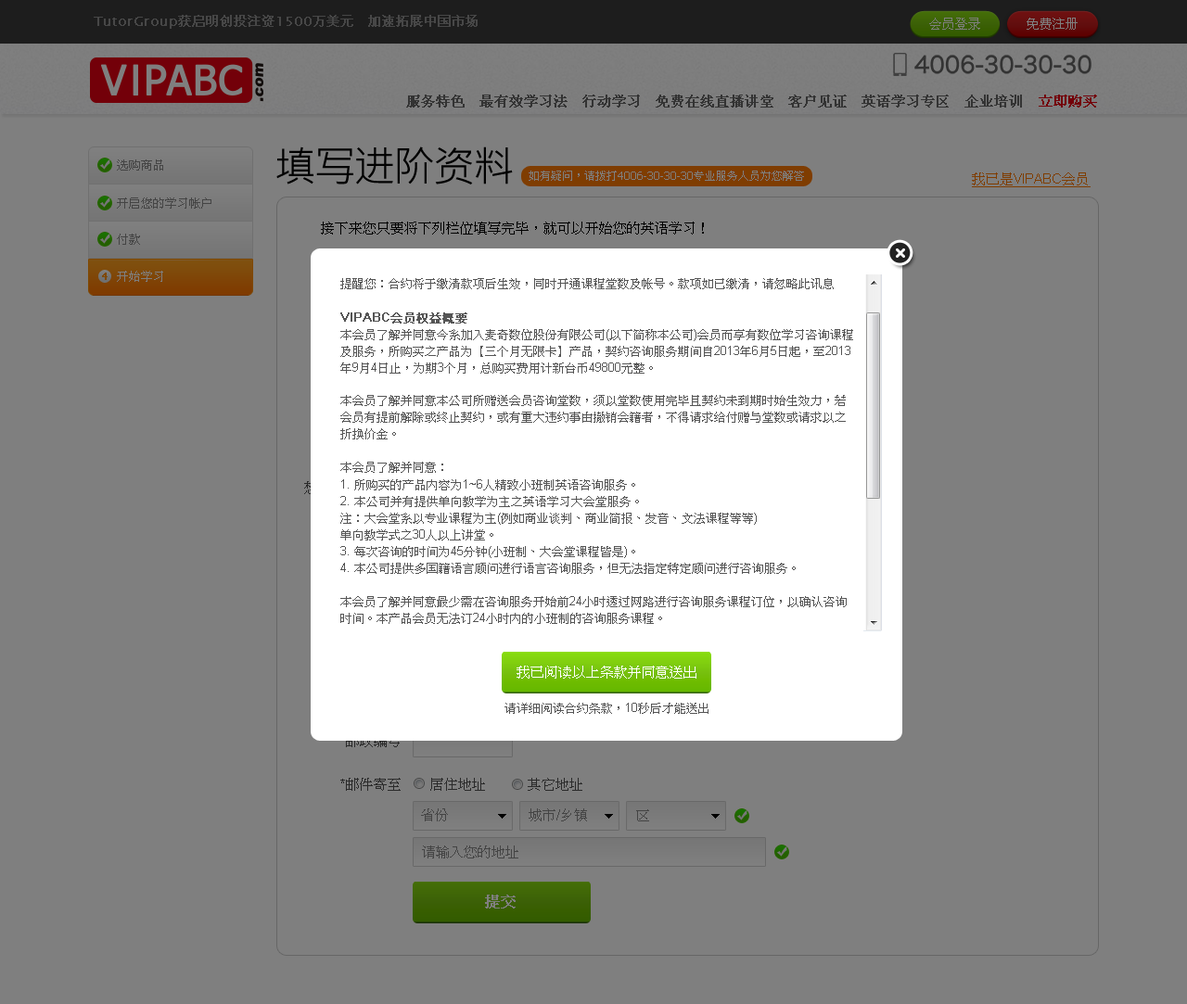
<style>
.page{position:relative;width:1187px;height:1004px;background:#7f7f7f}
.page>*{position:absolute;margin:0}
.t1{font:41.7px "MicrosoftJhengHeiRegular";letter-spacing:-0.05em;color:#000000}
.t2{font:12.1px "PMingLiU";color:#444444}
.t3{font:11.1px "Tahoma";color:#7f7f7f}
.t4{font:11.1px "PMingLiU";color:#7f7f7f}
.t5{font:13.9px "ArialMT";color:#7f3d01;text-decoration:underline}
.t6{font:13.9px "PMingLiU";color:#7f3d01;text-decoration:underline}
.t7{font:13.9px "PMingLiU";color:#000000}
.t8{font:10.2px "Tahoma";color:#7f4800;font-weight:bold}
.t9{font:12.1px "PMingLiU";color:#7f7f7f}
.t10{font:12.1px/16.7px "PMingLiU";color:#555555}
.t11{font:12.1px/16.7px "ArialMT";color:#555555;font-weight:bold}
.t12{font:12.1px/16.7px "PMingLiU";color:#555555;font-weight:bold}
.t13{font:12.1px/16.7px "ArialMT";color:#555555}
.t14{font:13.9px "PMingLiU";color:#ffffff}
.t15{font:12.1px "PMingLiU";color:#555555}
.t16{font:12.1px "ArialMT";color:#555555}
.t17{font:13.9px "PMingLiU";color:#2a2a2a}
.t18{font:13.9px "PMingLiU";color:#444444}
.t19{font:14.8px "PMingLiU";color:#7f7f7f;font-weight:bold}
</style>
<div class="page">
<p class="t1" style="left:276px;top:147px;width:237px;height:38px">填写进阶资料</p>
<p class="t2" style="left:117px;top:160px;width:46px;height:11px">选购商品</p>
<p class="t3" style="left:529px;top:171px;width:275px;height:10px"><span class="t4">如有疑问，请拨打</span>4006-30-30-30<span class="t4">专业服务人员为您解答</span></p>
<p class="t5" style="left:972px;top:173px;width:119px;height:14px"><span class="t6">我已是</span>VIPABC<span class="t6">会员</span></p>
<p class="t2" style="left:117px;top:198px;width:94px;height:11px">开启您的学习帐户</p>
<p class="t7" style="left:321px;top:222px;width:383px;height:13px">接下来您只要将下列栏位填写完毕，就可以开始您的英语学习！</p>
<p class="t2" style="left:117px;top:234px;width:23px;height:11px">付款</p>
<p class="t8" style="left:102px;top:273px;width:6px;height:7px">4</p>
<p class="t9" style="left:117px;top:271px;width:46px;height:11px">开始学习</p>
<p class="t10" style="left:340px;top:278px;width:513px;height:346px">提醒您：合约将于缴清款项后生效，同时开通课程堂数及帐号。款项如已缴清，请忽略此讯息<br><br><span class="t11">VIPABC</span><span class="t12">会员权益概要<br></span>本会员了解并同意今系加入麦奇数位股份有限公司<span class="t13">(</span>以下简称本公司<span class="t13">)</span>会员而享有数位学习咨询课程及服务，所购买之产品为【三个月无限卡】产品，契约咨询服务期间自<span class="t13">2013</span>年<span class="t13">6</span>月<span class="t13">5</span>日起，至<span class="t13">2013</span>年<span class="t13">9</span>月<span class="t13">4</span>日止，为期<span class="t13">3</span>个月，总购买费用计新台币<span class="t13">49800</span>元整。<br><br>本会员了解并同意本公司所赠送会员咨询堂数，须以堂数使用完毕且契约未到期时始生效力，若会员有提前解除或终止契约，或有重大违约事由撤销会籍者，不得请求给付赠与堂数或请求以之折换价金。<br><br>本会员了解并同意：<span class="t13"><br>1. </span>所购买的产品内容为<span class="t13">1~6</span>人精致小班制英语咨询服务。<span class="t13"><br>2. </span>本公司并有提供单向教学为主之英语学习大会堂服务。<br>注：大会堂系以专业课程为主<span class="t13">(</span>例如商业谈判、商业简报、发音、文法课程等等<span class="t13">)<br></span>单向教学式之<span class="t13">30</span>人以上讲堂。<span class="t13"><br>3. </span>每次咨询的时间为<span class="t13">45</span>分钟<span class="t13">(</span>小班制、大会堂课程皆是<span class="t13">)</span>。<span class="t13"><br>4. </span>本公司提供多国籍语言顾问进行语言咨询服务，但无法指定特定顾问进行咨询服务。<br>     <br>本会员了解并同意最少需在咨询服务开始前<span class="t13">24</span>小时透过网路进行咨询服务课程订位，以确认咨询时间。本产品会员无法订<span class="t13">24</span>小时内的小班制的咨询服务课程。<br><br>若本会员为第一次购买<span class="t13">VIPABC</span>数位学习咨询课程及服务者，本会员了解并同意于购买产品后七日内享有审阅权，如七日内﹙即<span class="t13">2013/6/11</span>﹚因产品内容或服务方式不符合本会员使用需求而欲办理退费，本公司将无息退回会员缴付之款项；如超过七日后因个人因素<span class="t13">​​</span>办理退费者，则应按照退费规定办理<span class="t13">(</span>有关退费之详细规范仍以会员入会契约书为准<span class="t13">)</span>。<br>     <br>本会员了解并同意会员不得将会籍出售、转让给予他人使用，非经本公司同意私下出售、转让会造成丧失会员资格且不得请求退还未使用咨询服务课程及期间之费用。<br>     <br>本会员对于<span class="t13">TutorABC</span>会员入会契约书<span class="t13">(</span>下称本契约<span class="t13">)</span>之全部条款已于合理期间内充份阅读了解。本会员了解并同意一旦按下「同意」之按键，即视为本会员已经事先于合理期间内详细审阅本契约书所有条款，并同意完全遵守本契约书之所有约定。</p>
<p class="t14" style="left:517px;top:666px;width:180px;height:13px">我已阅读以上条款并同意送出</p>
<p class="t15" style="left:505px;top:703px;width:204px;height:11px">请详细阅读合约条款，<span class="t16">10</span>秒后才能送出</p>
<p class="t17" style="left:430px;top:778px;width:152px;height:13px">居住地址　　　其它地址</p>
<p class="t18" style="left:421px;top:809px;width:27px;height:13px">省份</p>
<p class="t18" style="left:529px;top:809px;width:58px;height:13px">城市/乡镇</p>
<p class="t18" style="left:636px;top:810px;width:13px;height:12px">区</p>
<p class="t18" style="left:422px;top:846px;width:96px;height:13px">请输入您的地址</p>
<p class="t19" style="left:485px;top:895px;width:31px;height:14px">提交</p>
</div>
